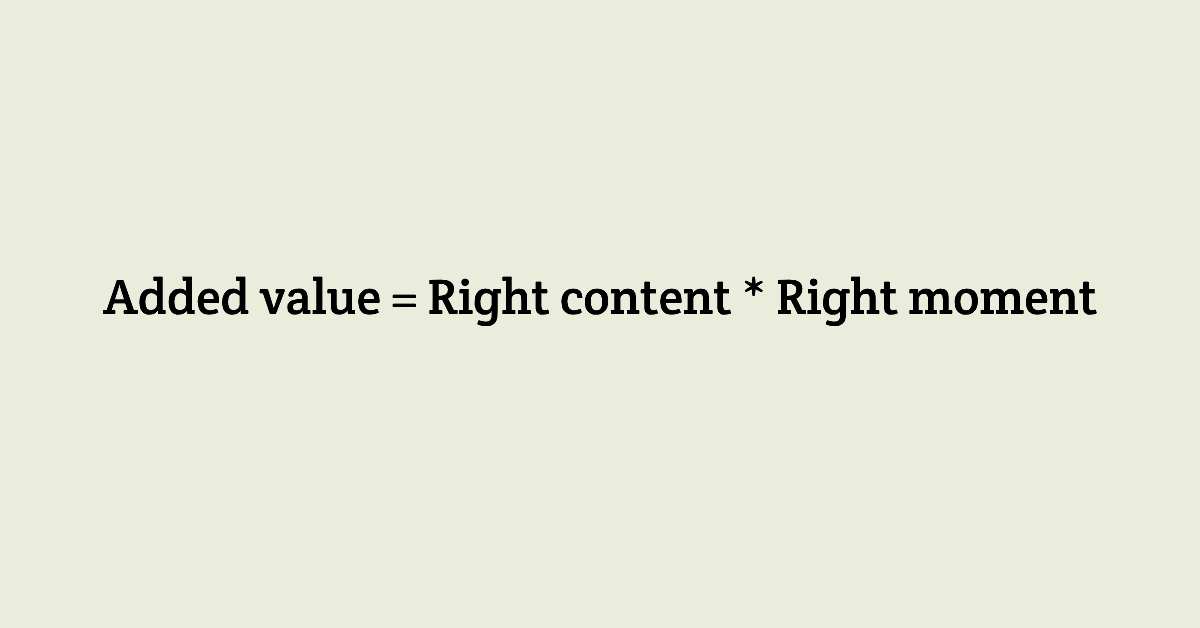
<style>
.page{position:relative;width:1200px;height:628px;background:#eaecdc}
.page>*{position:absolute;margin:0}
.t1{font:50px "CreteRound-Regular";color:#000000}
</style>
<div class="page">
<p class="t1" style="left:103px;top:276px;width:994px;height:50px">Added value = Right content * Right moment</p>
</div>
